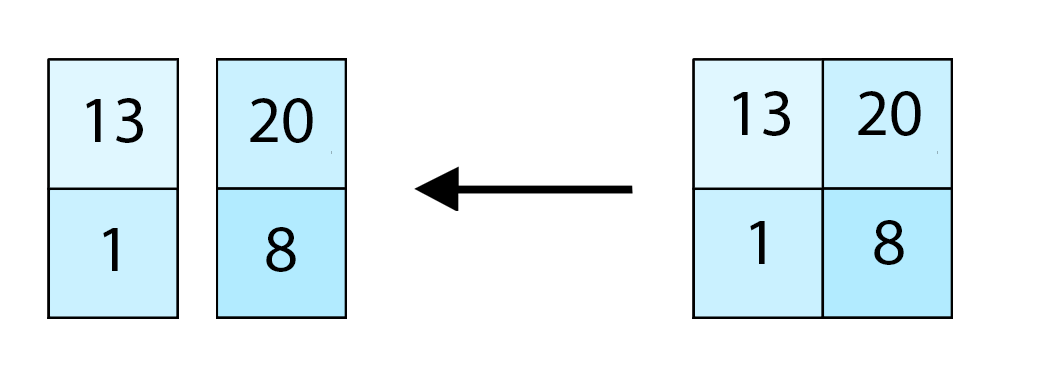
<style>
.page{position:relative;width:1050px;height:375px;background:#ffffff}
.page>*{position:absolute;margin:0}
.t1{font:66.7px "MyriadPro-Regular";color:#000000}
</style>
<div class="page">
<p class="t1" style="left:86px;top:98px;width:57px;height:45px">13</p>
<p class="t1" style="left:250px;top:98px;width:63px;height:45px">20</p>
<p class="t1" style="left:733px;top:91px;width:57px;height:45px">13</p>
<p class="t1" style="left:858px;top:91px;width:63px;height:45px">20</p>
<p class="t1" style="left:750px;top:221px;width:15px;height:43px">1</p>
<p class="t1" style="left:874px;top:220px;width:30px;height:45px">8</p>
<p class="t1" style="left:103px;top:228px;width:15px;height:43px">1</p>
<p class="t1" style="left:266px;top:227px;width:30px;height:45px">8</p>
</div>
